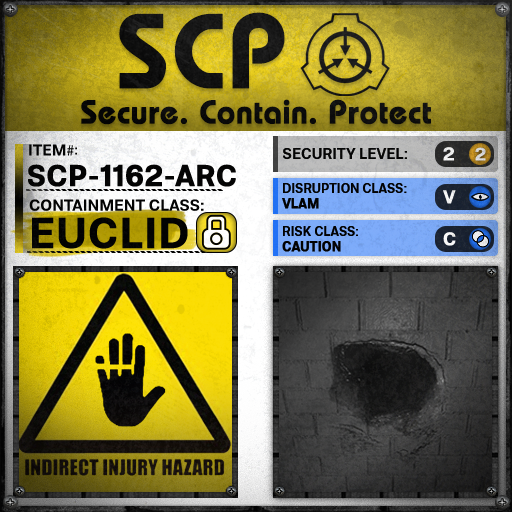
<style>
.page{position:relative;width:512px;height:512px}
.page>*{position:absolute;margin:0}
.t1{font:105.8px "BauhausLT-Demi";color:#000000;font-weight:bold}
.t2{font:33px "BauhausLT-Demi";color:#000000;font-weight:bold}
.t3{font:15.7px "Molde-Semibold";color:#000000}
.t4{font:15.7px "MyriadPro-Regular";color:#000000}
.t5{font:13.7px "Molde-Semibold";color:#000000}
.t6{font:15px "Molde-Semibold";color:#000000}
.t7{font:18.6px "Molde-Semibold";color:#ffffff;font-weight:bold}
.t8{font:17.8px "Molde-Semibold";color:#d7d8d7;font-weight:bold}
.t9{font:29.4px "Molde-Semibold";color:#000000;font-weight:bold}
.t10{font:12.8px "Molde-Semibold";color:#000000}
.t11{font:12.8px "Molde-Semibold";color:#000000;font-weight:bold}
.t12{font:15.9px "Molde-Semibold";color:#000000}
.t13{font:42.8px "Molde-Semibold";color:#000000;font-weight:bold}
</style>
<div class="page">
<p class="t1" style="left:119px;top:12px;width:166px;height:77px">SCP</p>
<p class="t2" style="left:81px;top:99px;width:350px;height:26px">Secure. Contain. Protect</p>
<p class="t3" style="left:29px;top:144px;width:45px;height:12px">ITEM<span class="t4">#</span></p>
<p class="t5" style="left:75px;top:147px;width:2px;height:8px">:</p>
<p class="t6" style="left:283px;top:148px;width:124px;height:11px">SECURITY LEVEL:</p>
<p class="t7" style="left:443px;top:147px;width:11px;height:14px">2</p>
<p class="t8" style="left:475px;top:147px;width:11px;height:14px">2</p>
<p class="t9" style="left:28px;top:164px;width:208px;height:23px">SCP-1162-ARC</p>
<p class="t10" style="left:282px;top:183px;width:125px;height:26px">DISRUPTION CLASS:<br><span class="t11">VLAM</span></p>
<p class="t7" style="left:443px;top:190px;width:13px;height:14px">V</p>
<p class="t12" style="left:29px;top:199px;width:175px;height:12px">CONTAINMENT CLASS:</p>
<p class="t13" style="left:32px;top:217px;width:156px;height:32px">EUCLID</p>
<p class="t10" style="left:282px;top:226px;width:76px;height:26px">RISK CLASS:<br><span class="t11">CAUTION</span></p>
<p class="t7" style="left:443px;top:232px;width:13px;height:14px">C</p>
</div>
